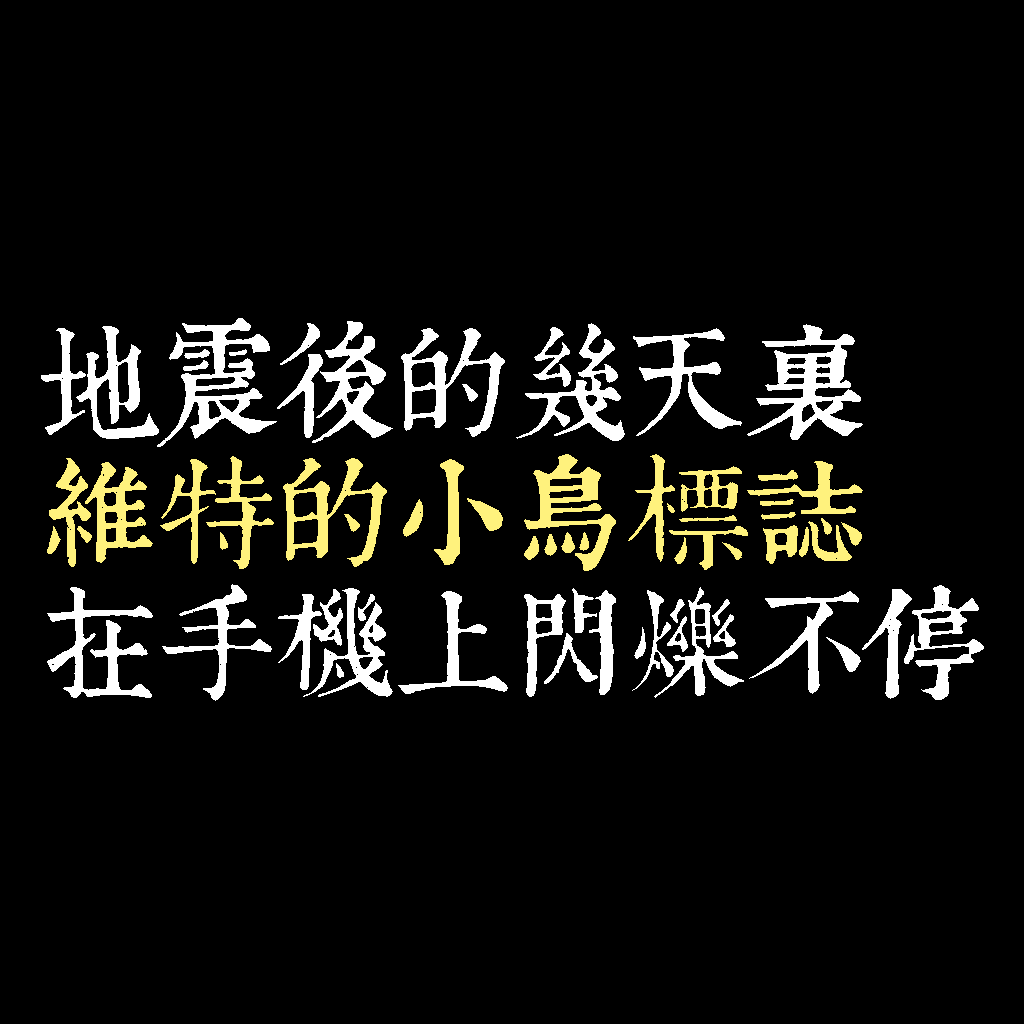
<style>
.page{position:relative;width:1024px;height:1024px;background:#000000}
.page>*{position:absolute;margin:0}
.t1{font:120px/130px "TpldKhangXiDictTrial";letter-spacing:-0.02em;color:#ffffff}
.t2{font:120px/130px "TpldKhangXiDictTrial";letter-spacing:-0.02em;color:#fff27d}
</style>
<div class="page">
<p class="t1" style="left:41px;top:318px;width:943px;height:383px">地震後的幾天裏<br><span class="t2">維特的小鳥標誌<br></span>在手機上閃爍不停</p>
</div>
